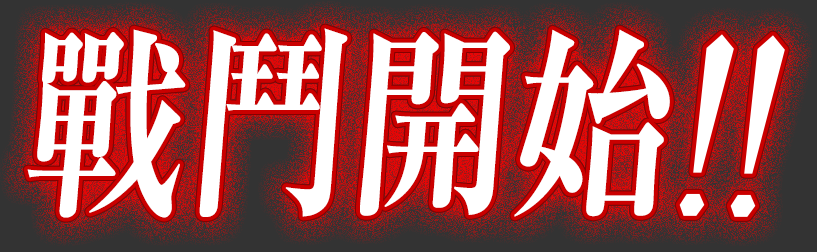
<style>
.page{position:relative;width:817px;height:252px;background:#ffffff}
.page>*{position:absolute;margin:0}
.t1{font:204px "RyuminPro-ExBold";letter-spacing:0.05em;color:#ffffff;scale:0.79 1}
</style>
<div class="page">
<p class="t1" style="left:27px;top:28px;width:643px;height:190px">戰鬥開始</p>
<p class="t1" style="left:27px;top:28px;width:643px;height:190px">戰鬥開始</p>
</div>
